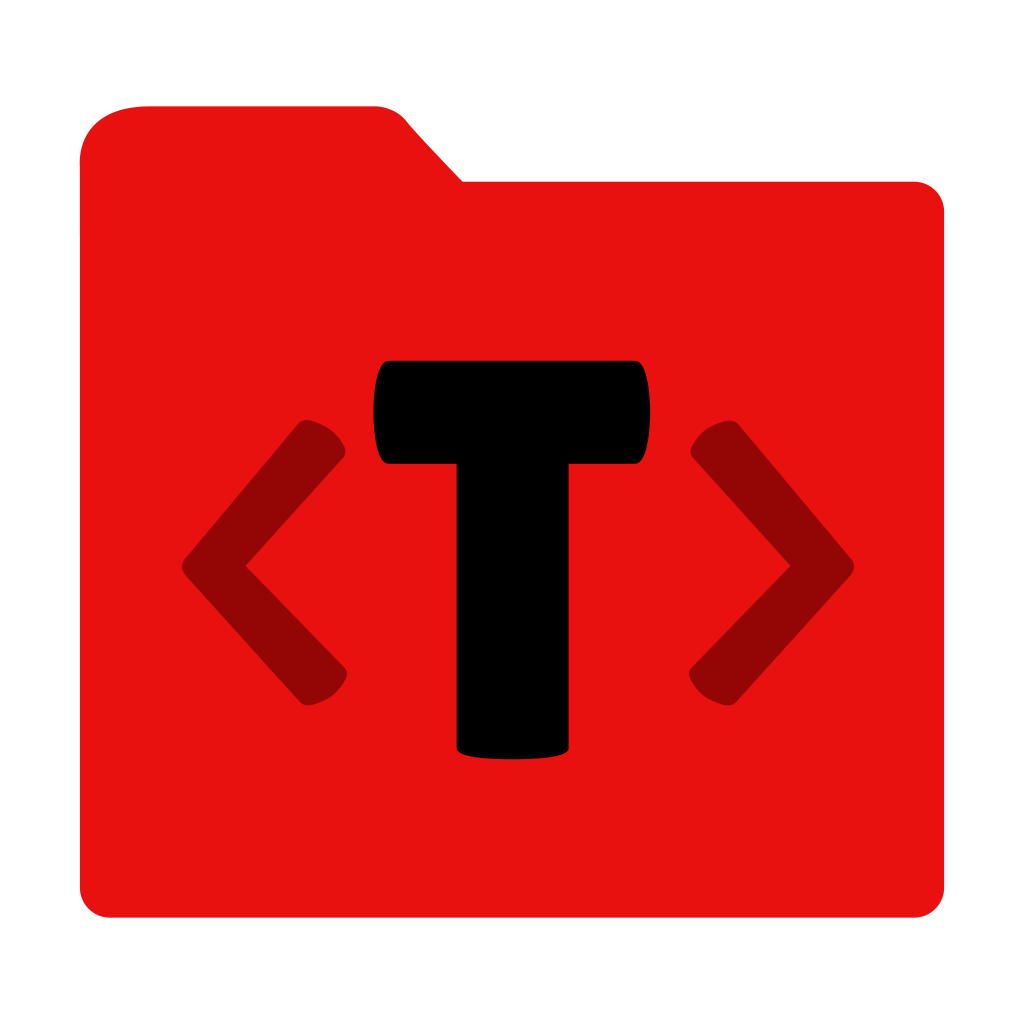
<style>
.page{position:relative;width:1024px;height:1024px;background:#e91010}
.page>*{position:absolute;margin:0}
.t1{font:566px "LilitaOne";letter-spacing:-0.04em;color:#000000}
.t2{font:480.5px "LilitaOne";letter-spacing:-0.04em;color:#940606}
</style>
<div class="page">
<p class="t1" style="left:373px;top:360px;width:278px;height:400px">T</p>
<p class="t2" style="left:182px;top:420px;width:165px;height:286px">&lt;</p>
<p class="t2" style="left:689px;top:420px;width:165px;height:286px">&gt;</p>
</div>
